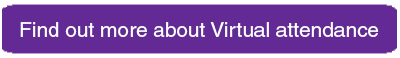
<style>
.page{position:relative;width:400px;height:58px;background:#632994}
.page>*{position:absolute;margin:0}
.t1{font:20.8px "HelveticaCE";color:#ffffff}
</style>
<div class="page">
<p class="t1" style="left:20px;top:22px;width:359px;height:15px">Find out more about Virtual attendance</p>
</div>
